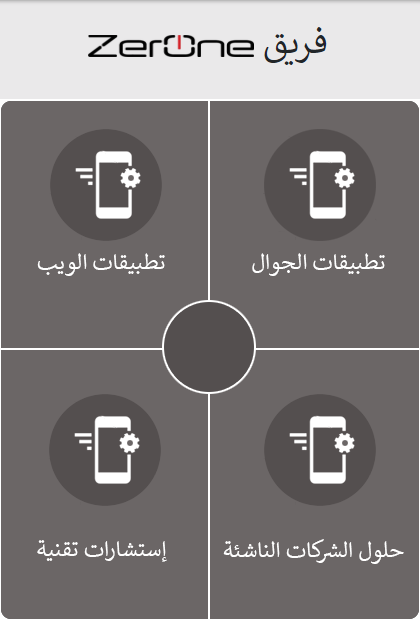
<style>
.page{position:relative;width:420px;height:621px;background:#6b6666}
.page>*{position:absolute;margin:0}
.t1{font:25px "Calibri";color:#ffffff}
</style>
<div class="page">
<p class="t1" style="left:37px;top:253px;width:128px;height:23px">تطبيقات الويب</p>
<p class="t1" style="left:252px;top:253px;width:133px;height:23px">تطبيقات الجوال</p>
<p class="t1" style="left:37px;top:540px;width:130px;height:22px">إستشارات تقنية</p>
<p class="t1" style="left:223px;top:539px;width:181px;height:25px">حلول الشركات الناشئة</p>
</div>
